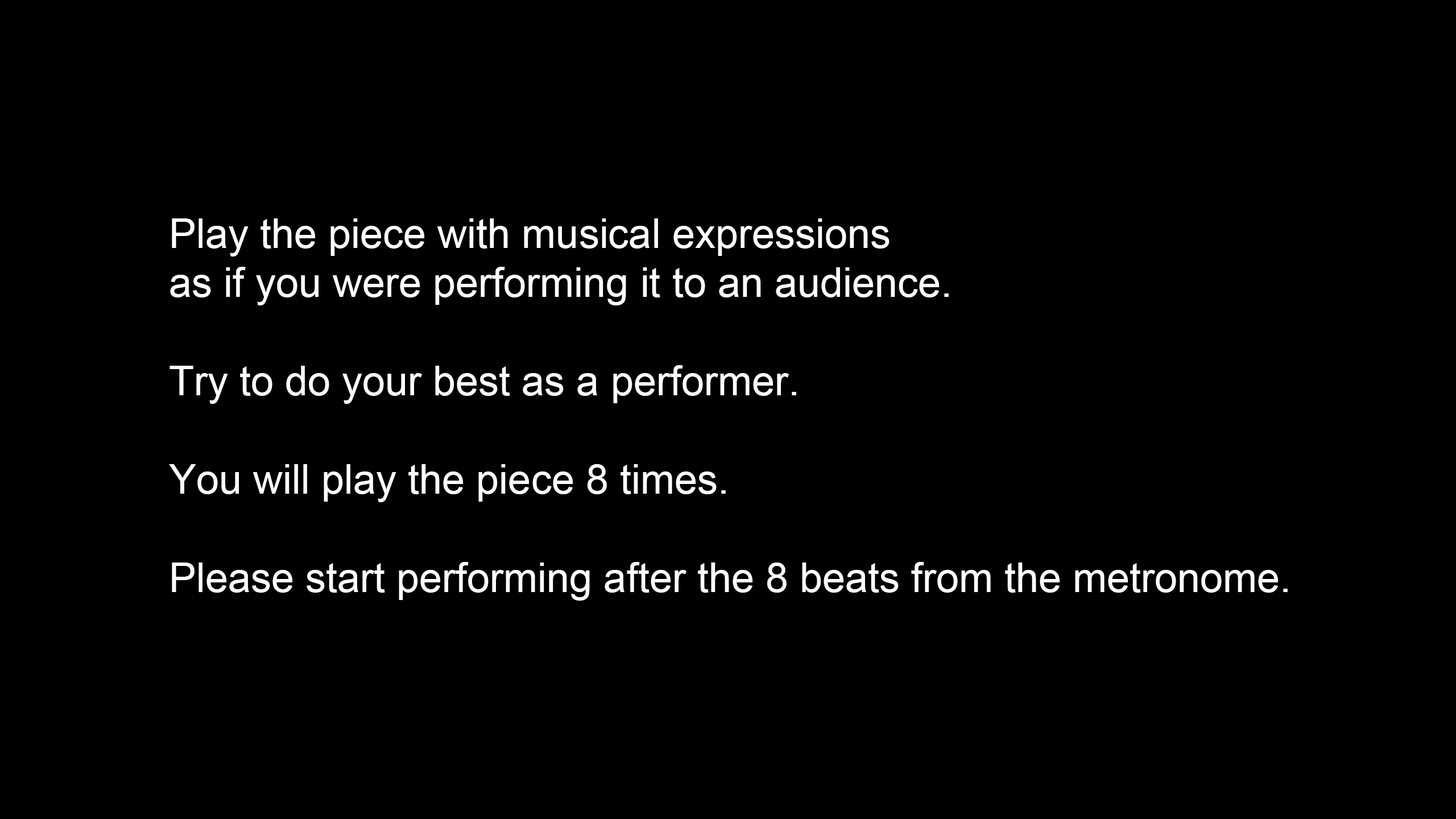
<style>
.page{position:relative;width:1456px;height:819px;background:#000000}
.page>*{position:absolute;margin:0}
.t1{font:40.9px "ArialMT";color:#ffffff}
</style>
<div class="page">
<p class="t1" style="left:169px;top:218px;width:1119px;height:383px">Play the piece with musical expressions<br>as if you were performing it to an audience.<br><br>Try to do your best as a performer.<br><br>You will play the piece 8 times.<br><br>Please start performing after the 8 beats from the metronome.</p>
</div>
